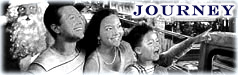
<style>
.page{position:relative;width:238px;height:75px}
.page>*{position:absolute;margin:0}
.t1{font:14px "EngraversMT";letter-spacing:0.1em;color:#06064a;font-weight:bold}
</style>
<div class="page">
<p class="t1" style="left:133px;top:5px;width:102px;height:11px">journey</p>
</div>
